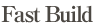
<style>
.page{position:relative;width:108px;height:27px;background:#ffffff}
.page>*{position:absolute;margin:0}
.t1{font:22px "RyuminPro-ExBold";letter-spacing:-0.08em;color:#4c4843}
</style>
<div class="page">
<p class="t1" style="left:1px;top:5px;width:92px;height:18px">Fast Build</p>
</div>
